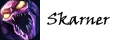
<style>
.page{position:relative;width:140px;height:40px;background:#ffffff}
.page>*{position:absolute;margin:0}
.t1{font:12px "VinerHandITC";color:#000000}
</style>
<div class="page">
<p class="t1" style="left:47px;top:11px;width:63px;height:15px">Skarner</p>
</div>
